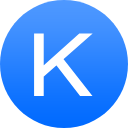
<style>
.page{position:relative;width:128px;height:128px;background:#ffffff}
.page>*{position:absolute;margin:0}
.t1{font:89.2px "LexendExa-Regular";color:#ffffff}
</style>
<div class="page">
<p class="t1" style="left:34px;top:33px;width:59px;height:63px">K</p>
</div>
